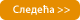
<style>
.page{position:relative;width:80px;height:20px;background:#e68d00}
.page>*{position:absolute;margin:0}
.t1{font:11px "MyriadPro-Semibold";color:#ffffff}
</style>
<div class="page">
<p class="t1" style="left:13px;top:5px;width:57px;height:10px">Следећа &gt;&gt;</p>
</div>
